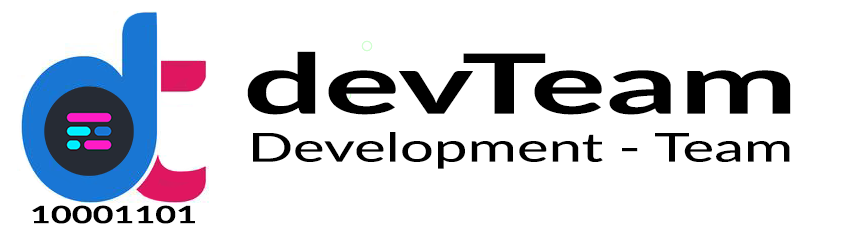
<style>
.page{position:relative;width:850px;height:227px;background:#ffffff}
.page>*{position:absolute;margin:0}
.t1{font:40px "Lato-Regular";color:#000000;scale:1.5 1}
.t2{font:83px/9px "Lato-Bold";color:#000000;scale:1.72 1}
</style>
<div class="page">
<p class="t1" style="left:247px;top:51px;width:544px;height:118px;text-align:center"><span class="t2">devTeam<br></span>Development - Team</p>
</div>
